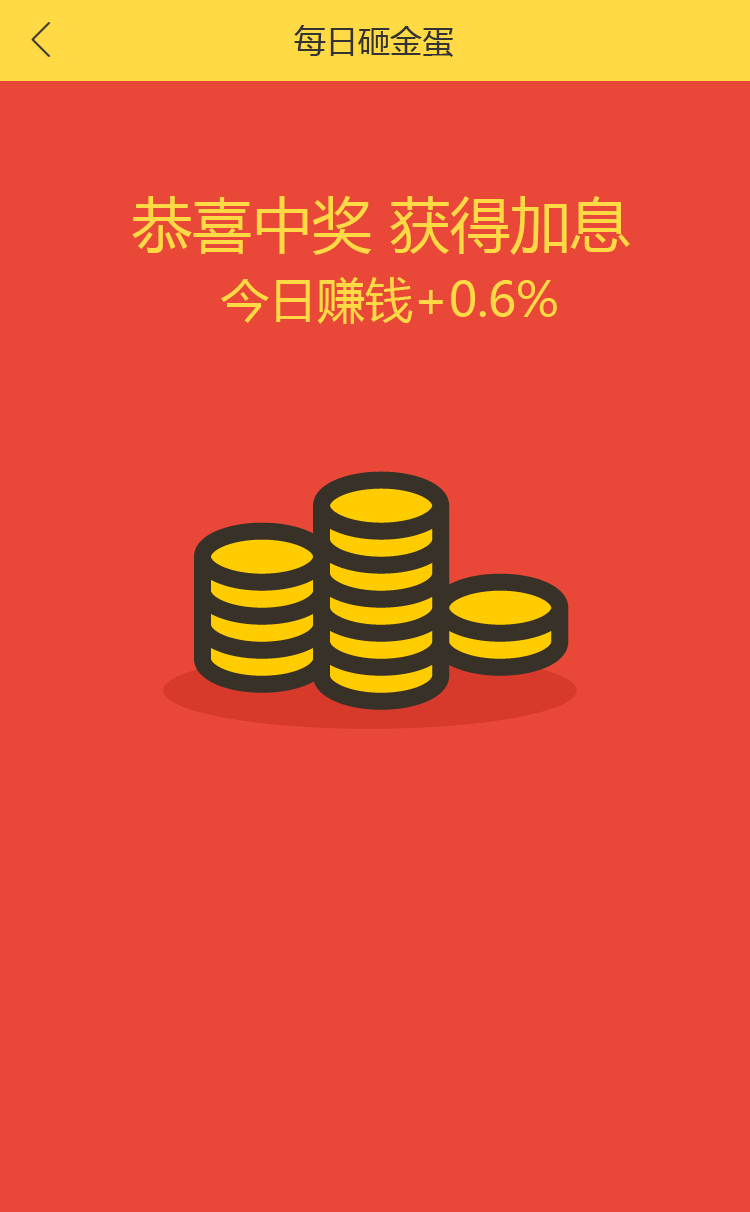
<style>
.page{position:relative;width:750px;height:1212px;background:#e94838}
.page>*{position:absolute;margin:0}
.t1{font:32px "MicrosoftYaHei";color:#333333}
.t2{font:60px/81.4px "MicrosoftYaHei";color:#ffda44}
.t3{font:48px/81.4px "MicrosoftYaHei";color:#ffda44}
</style>
<div class="page">
<p class="t1" style="left:294px;top:25px;width:159px;height:32px">每日砸金蛋</p>
<p class="t2" style="left:132px;top:196px;width:498px;height:128px;text-align:center">恭喜中奖 获得加息 <br><span class="t3">今日赚钱+0.6%</span></p>
</div>
